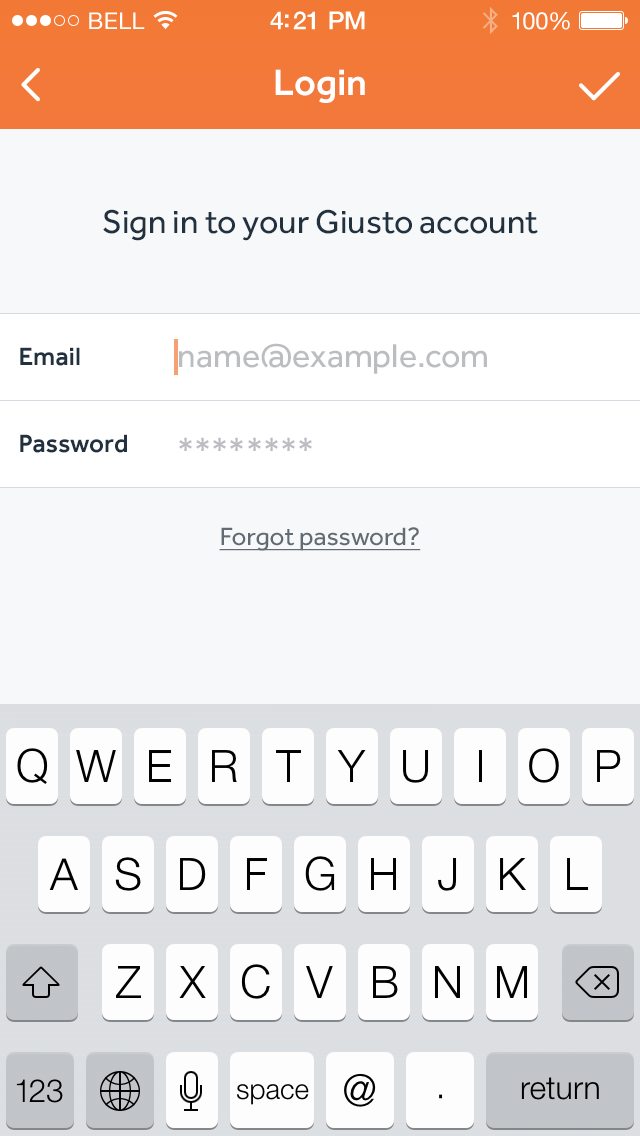
<style>
.page{position:relative;width:640px;height:1136px;background:#f6f8fa}
.page>*{position:absolute;margin:0}
.t1{font:23px "HelveticaNeue";letter-spacing:0.02em;color:#ffffff}
.t2{font:25px "HelveticaNeue-Medium";letter-spacing:-0.02em;color:#ffffff}
.t3{font:24px "HelveticaNeue";letter-spacing:-0.02em;color:#ffffff}
.t4{font:38px "Effra-Medium";color:#ffffff}
.t5{font:34px "Effra-Regular";color:#22313f}
.t6{font:26px "Effra-Medium";color:#22313f}
.t7{font:34px "Effra-Regular";color:#bbbdc1}
.t8{font:26px "Effra-Regular";color:#626a73;text-decoration:underline}
</style>
<div class="page">
<p class="t1" style="left:89px;top:12px;width:56px;height:17px">BELL</p>
<p class="t2" style="left:270px;top:11px;width:95px;height:19px">4:21 PM</p>
<p class="t3" style="left:512px;top:12px;width:58px;height:18px">100%</p>
<p class="t4" style="left:275px;top:69px;width:90px;height:34px">Login</p>
<p class="t5" style="left:103px;top:209px;width:435px;height:32px">Sign in to your Giusto account</p>
<p class="t6" style="left:20px;top:347px;width:60px;height:19px">Email</p>
<p class="t7" style="left:179px;top:343px;width:308px;height:31px">name@example.com</p>
<p class="t6" style="left:20px;top:434px;width:107px;height:19px">Password</p>
<p class="t7" style="left:179px;top:437px;width:133px;height:14px">********</p>
<p class="t8" style="left:219px;top:527px;width:202px;height:24px">Forgot password?</p>
</div>
